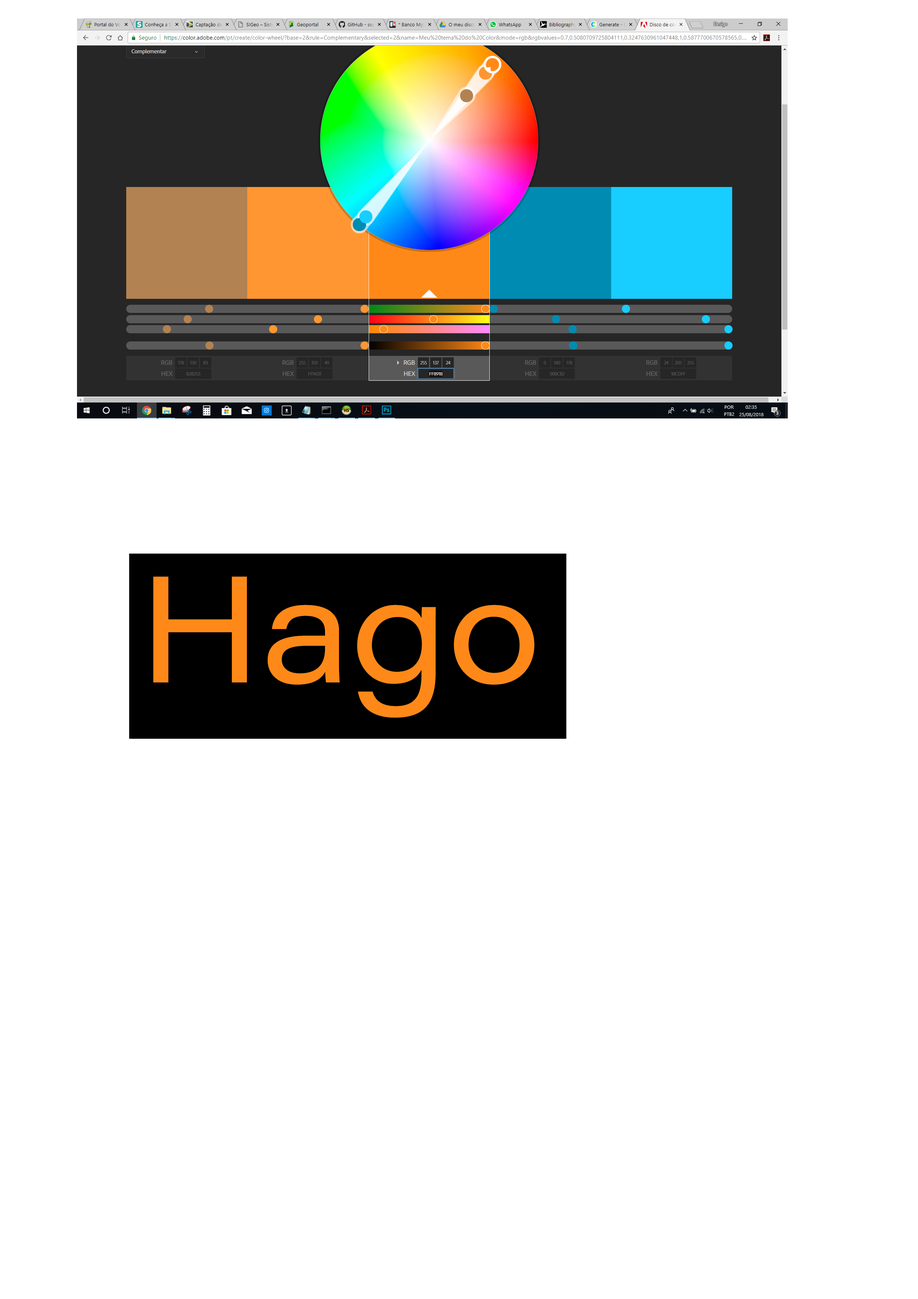
<style>
.page{position:relative;width:918px;height:1299px;background:#ffffff}
.page>*{position:absolute;margin:0}
.t1{font:148.8px "AcuminConcept-Wide";color:#ff8918}
</style>
<div class="page">
<p class="t1" style="left:153px;top:576px;width:382px;height:141px">Hago</p>
</div>
